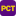
<style>
.page{position:relative;width:16px;height:16px}
.page>*{position:absolute;margin:0}
.t1{font:9px "Roboto-Bold";letter-spacing:-0.045em;color:#efd20c;font-variant:small-caps}
</style>
<div class="page">
<p class="t1" style="left:1px;top:5px;width:15px;height:7px">pct</p>
</div>
